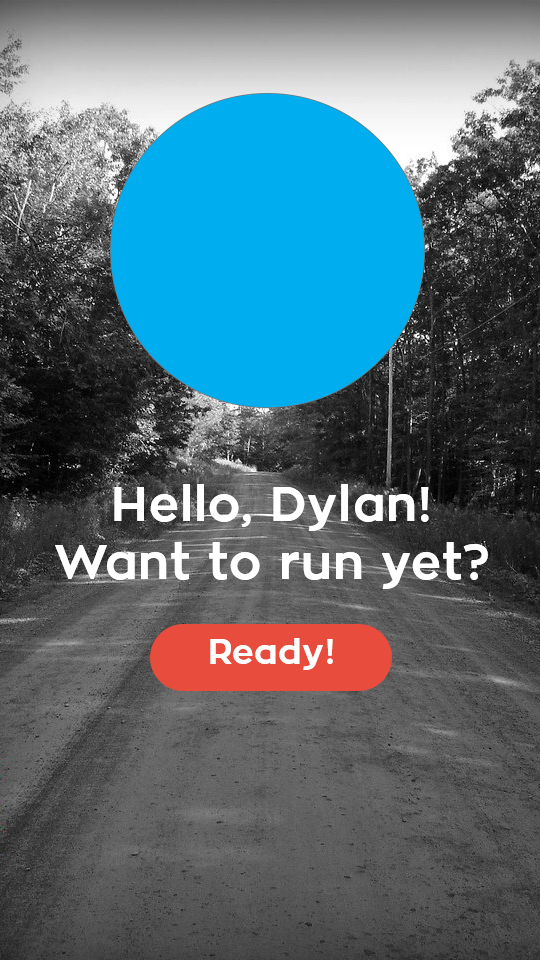
<style>
.page{position:relative;width:540px;height:960px}
.page>*{position:absolute;margin:0}
.t1{font:48.6px "ZonaPro-Bold";letter-spacing:0.02em;color:#ffffff}
.t2{font:34.7px "ZonaPro-Bold";letter-spacing:0.02em;color:#ffffff}
</style>
<div class="page">
<p class="t1" style="left:55px;top:484px;width:433px;height:105px;text-align:center">Hello, Dylan!<br>Want to run yet?</p>
<p class="t2" style="left:210px;top:638px;width:123px;height:32px">Ready!</p>
</div>
